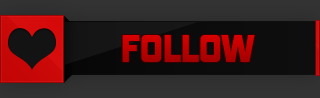
<style>
.page{position:relative;width:320px;height:98px}
.page>*{position:absolute;margin:0}
.t1{font:36px "KimberleyBl-Regular"}
</style>
<div class="page">
<p class="t1" style="left:122px;top:35px;width:133px;height:27px">FOLLOW</p>
</div>
